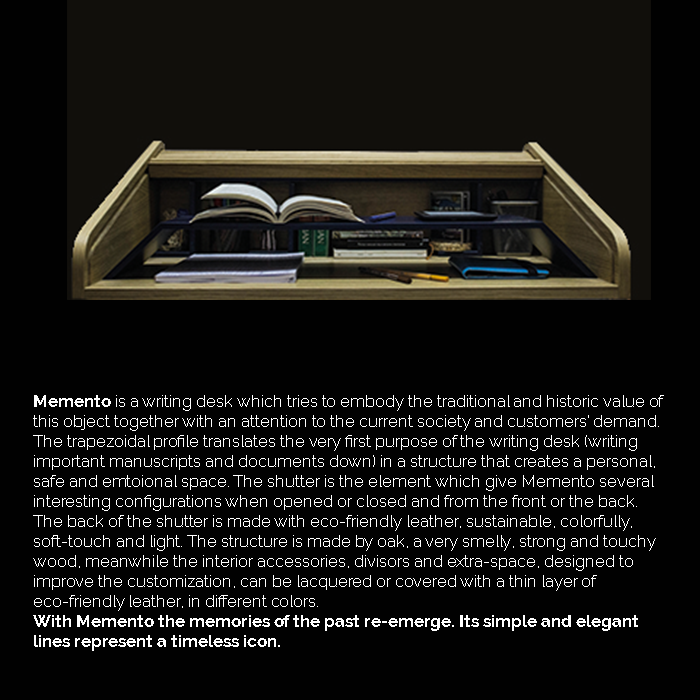
<style>
.page{position:relative;width:700px;height:700px;background:#010101}
.page>*{position:absolute;margin:0}
.t1{font:16.7px "Raleway-Thin";color:#ffffff}
.t2{font:16.7px "Raleway-Bold";color:#ffffff}
</style>
<div class="page">
<p class="t1" style="left:33px;top:395px;width:631px;height:256px"><span class="t2">Memento </span>is a writing desk which tries to embody the traditional and historic value of this object together with an attention to the current society and customers’ demand. The trapezoidal profile translates the very first purpose of the writing desk (writing important manuscripts and documents down) in a structure that creates a personal, safe and emtoional space. The shutter is the element which give Memento several interesting configurations when opened or closed and from the front or the back. The back of the shutter is made with eco-friendly leather, sustainable, colorfully, soft-touch and light. The structure is made by oak, a very smelly, strong and touchy wood, meanwhile the interior accessories, divisors and extra-space, designed to improve the customization, can be lacquered or covered with a thin layer of eco-friendly leather, in different colors. <br><span class="t2">With Memento the memories of the past re-emerge. Its simple and elegant lines represent a timeless icon.</span></p>
</div>
